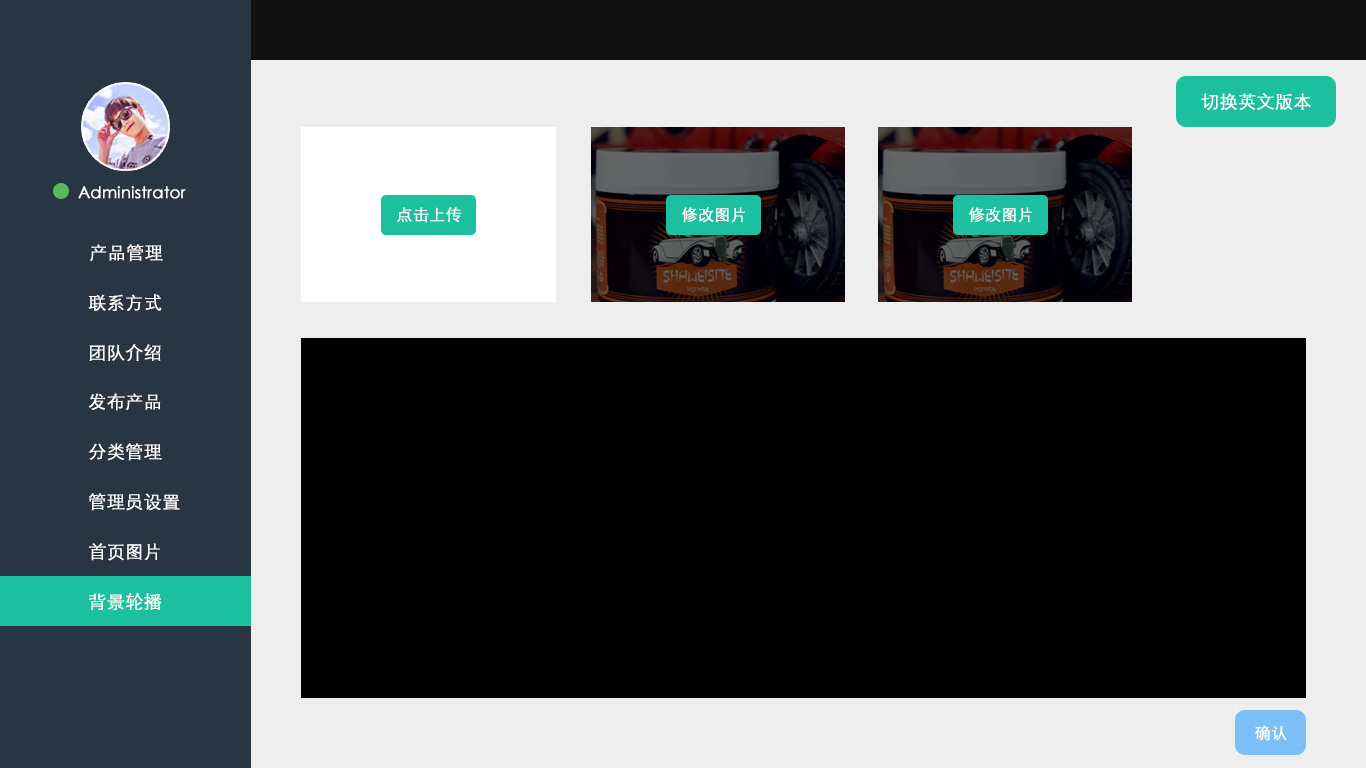
<style>
.page{position:relative;width:1366px;height:768px;background:#000000}
.page>*{position:absolute;margin:0}
.t1{font:18px "STXihei";color:#ffffff;font-weight:bold}
.t2{font:16px "STXihei";color:#ffffff;font-weight:bold}
.t3{font:16px "STXihei";color:#fefefe;font-weight:bold}
</style>
<div class="page">
<p class="t1" style="left:1201px;top:93px;width:110px;height:17px">切换英文版本</p>
<p class="t2" style="left:78px;top:186px;width:108px;height:13px">Administrator</p>
<p class="t3" style="left:397px;top:207px;width:65px;height:16px">点击上传</p>
<p class="t3" style="left:681px;top:207px;width:64px;height:16px">修改图片</p>
<p class="t3" style="left:968px;top:207px;width:64px;height:16px">修改图片</p>
<p class="t1" style="left:90px;top:244px;width:73px;height:18px">产品管理</p>
<p class="t1" style="left:88px;top:294px;width:74px;height:17px">联系方式</p>
<p class="t1" style="left:89px;top:344px;width:72px;height:17px">团队介绍</p>
<p class="t1" style="left:88px;top:393px;width:73px;height:18px">发布产品</p>
<p class="t1" style="left:89px;top:443px;width:73px;height:18px">分类管理</p>
<p class="t1" style="left:89px;top:493px;width:91px;height:18px">管理员设置</p>
<p class="t1" style="left:89px;top:543px;width:71px;height:18px">首页图片</p>
<p class="t1" style="left:89px;top:593px;width:73px;height:18px">背景轮播</p>
<p class="t2" style="left:1255px;top:725px;width:32px;height:16px">确认</p>
</div>
